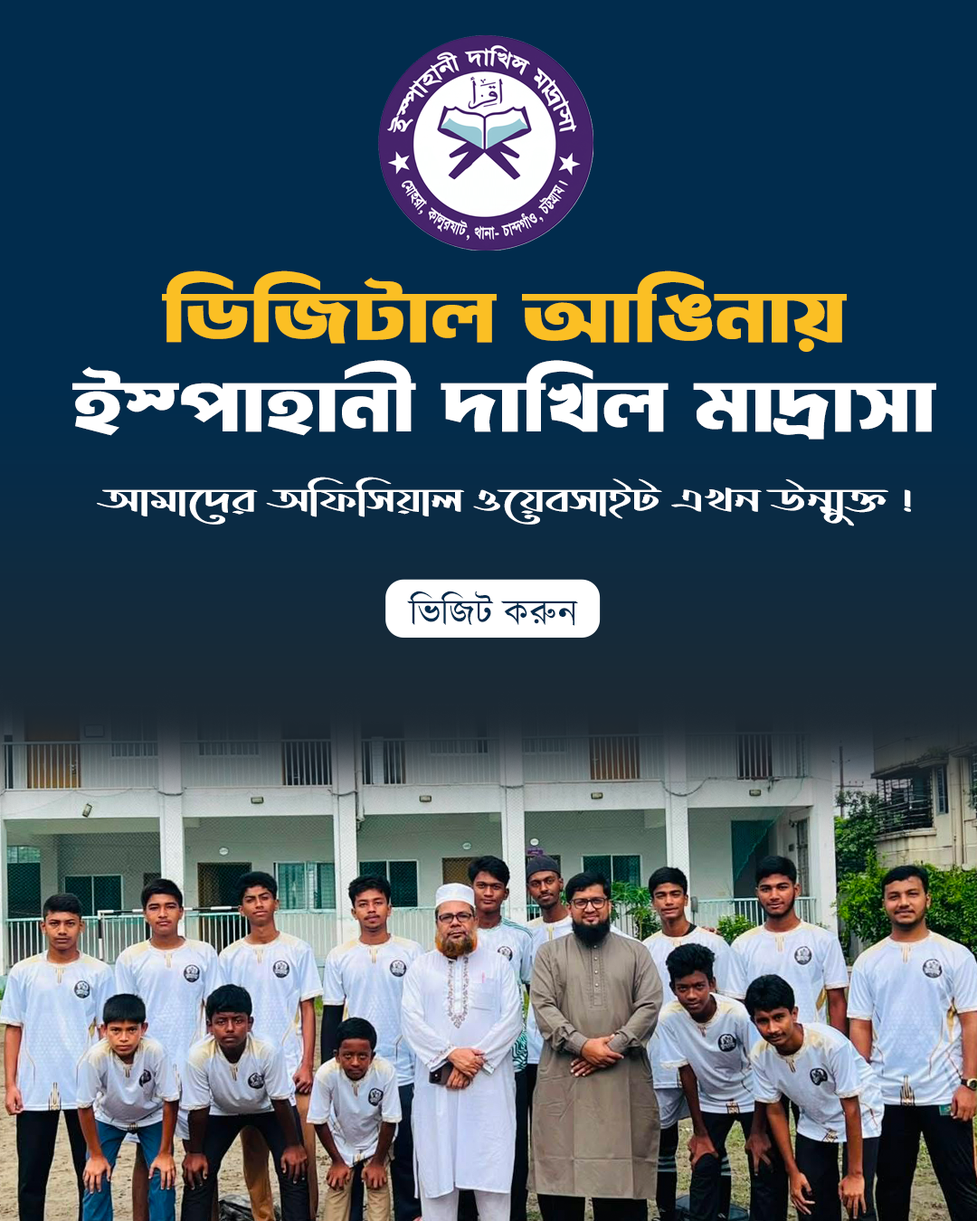
<style>
.page{position:relative;width:977px;height:1221px;background:#012c4d}
.page>*{position:absolute;margin:0}
.t1{font:74.3px "FNShorifOpekkhaBijoy52";color:#ffffff;scale:1.15 1}
.t2{font:74.3px "FNShorifOpekkhaBijoy52";color:#fbbf24;scale:1.15 1}
.t3{font:34.6px "LiShobujNoluaANSIV1";color:#ffffff;scale:1.43 1}
.t4{font:37.2px "KalpurushANSI";color:#012c4d}
</style>
<div class="page">
<p class="t1" style="left:72px;top:270px;width:864px;height:170px;text-align:center"><span class="t2">wWwRUvj AvwObvq<br></span>B¯cvnvbx `vwLj gv`ªvmv</p>
<p class="t3" style="left:97px;top:477px;width:814px;height:49px">Avgv‡`i Awdwmqvj I‡qemvBU GLb Db¥y³ !</p>
<p class="t4" style="left:407px;top:591px;width:171px;height:35px">wfwRU Ki“b</p>
</div>
